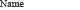
<style>
.page{position:relative;width:80px;height:10px;background:#ffffff}
.page>*{position:absolute;margin:0}
.t1{font:10px "TimesNewRomanPSMT";color:#323232}
</style>
<div class="page">
<p class="t1" style="left:0px;top:0px;width:24px;height:7px">Name</p>
</div>
